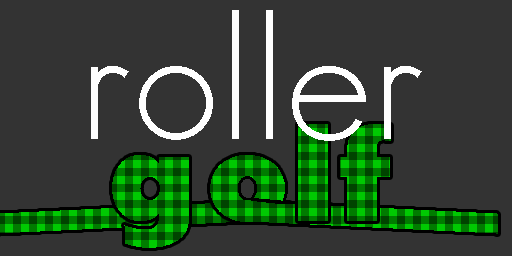
<style>
.page{position:relative;width:512px;height:256px;background:#333333}
.page>*{position:absolute;margin:0}
.t1{font:174.3px "SansSerifFLF";color:#ffffff}
.t2{font:131.3px "SansSerifExbFLF"}
</style>
<div class="page">
<p class="t1" style="left:91px;top:10px;width:331px;height:131px">roller</p>
<p class="t2" style="left:112px;top:124px;width:279px;height:124px">g  lf</p>
</div>
